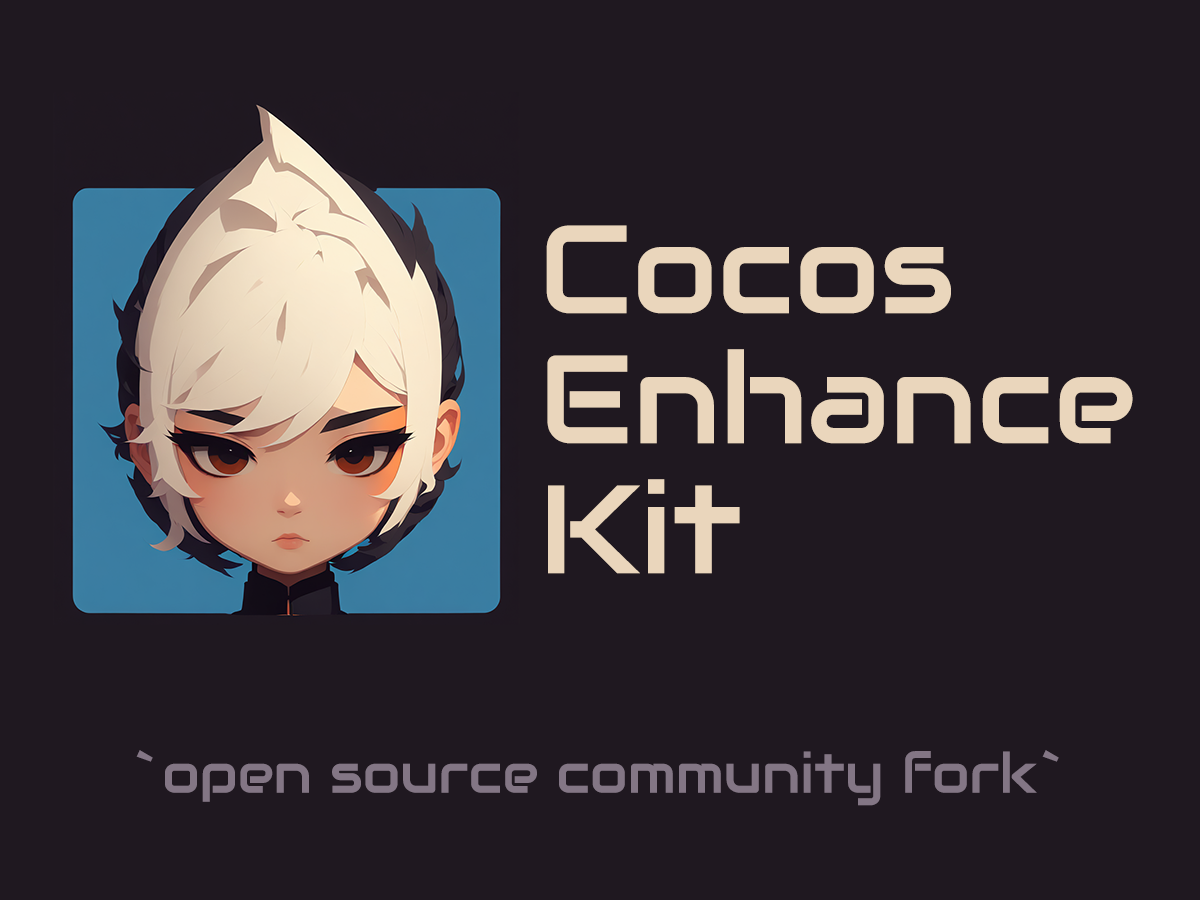
<style>
.page{position:relative;width:1200px;height:900px;background:#1f1820}
.page>*{position:absolute;margin:0}
.t1{font:125px/130px "Audiowide-Regular";color:#ead6bc}
.t2{font:55px "Audiowide-Regular";color:#837685}
</style>
<div class="page">
<p class="t1" style="left:546px;top:225px;width:587px;height:349px">Cocos<br>Enhance<br>Kit</p>
<p class="t2" style="left:136px;top:750px;width:923px;height:56px">`open source community fork`</p>
</div>
